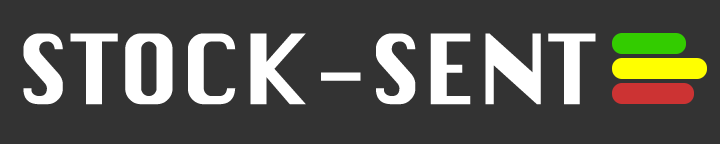
<style>
.page{position:relative;width:720px;height:144px;background:#333333}
.page>*{position:absolute;margin:0}
.t1{font:94px "Krungthep";color:#ffffff}
</style>
<div class="page">
<p class="t1" style="left:23px;top:33px;width:573px;height:72px">STOCK-SENT</p>
</div>
